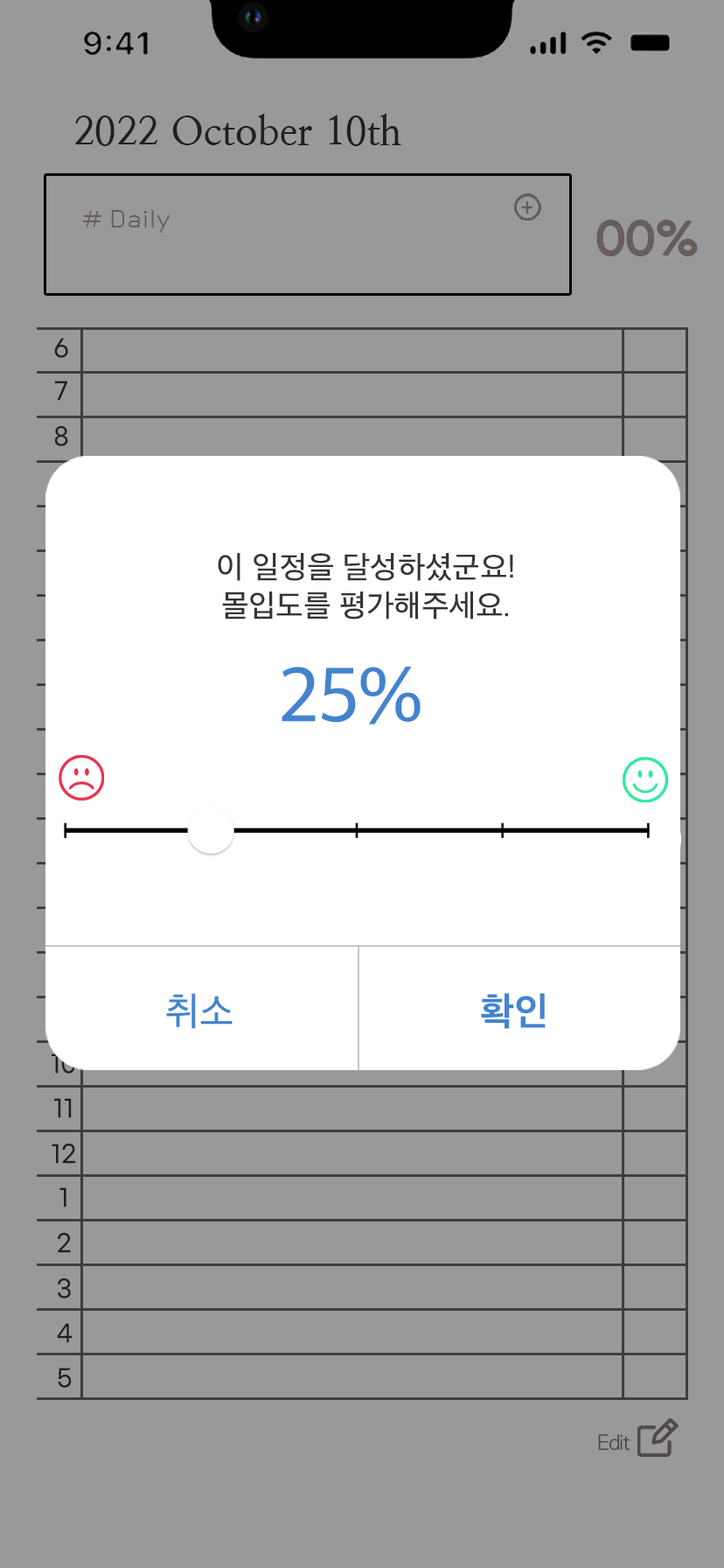
<style>
.page{position:relative;width:724px;height:1568px;background:#999999}
.page>*{position:absolute;margin:0}
.t1{font:39.6px "NanumMyeongjoBold";color:#353535}
.t2{font:23.8px "Cafe24Ssurroundair";color:#675d5c}
.t3{font:43.6px "GmarketSansTTFMedium";color:#675d5c}
.t4{font:31.7px "AppleSDGothicNeo-Medium";color:#353535}
.t5{font:79.2px "AppleSDGothicNeo-Medium";color:#4384cf}
.t6{font:39.6px "AppleSDGothicNeo-Medium";color:#4384cf}
.t7{font:39.6px "AppleSDGothicNeo-Bold";color:#4384cf}
.t8{font:19.8px "AppleGothic";color:#514949}
</style>
<div class="page">
<p class="t1" style="left:75px;top:114px;width:327px;height:32px">2022 October 10th</p>
<p class="t2" style="left:82px;top:210px;width:88px;height:23px"># Daily</p>
<p class="t3" style="left:598px;top:220px;width:99px;height:36px">00%</p>
<p class="t4" style="left:218px;top:553px;width:296px;height:67px;text-align:center">이 일정을 달성하셨군요!<br>몰입도를 평가해주세요.</p>
<p class="t5" style="left:282px;top:666px;width:139px;height:58px">25%</p>
<p class="t6" style="left:166px;top:993px;width:67px;height:36px">취소</p>
<p class="t7" style="left:481px;top:993px;width:65px;height:36px">확인</p>
<p class="t8" style="left:598px;top:1434px;width:33px;height:17px">Edit</p>
</div>
